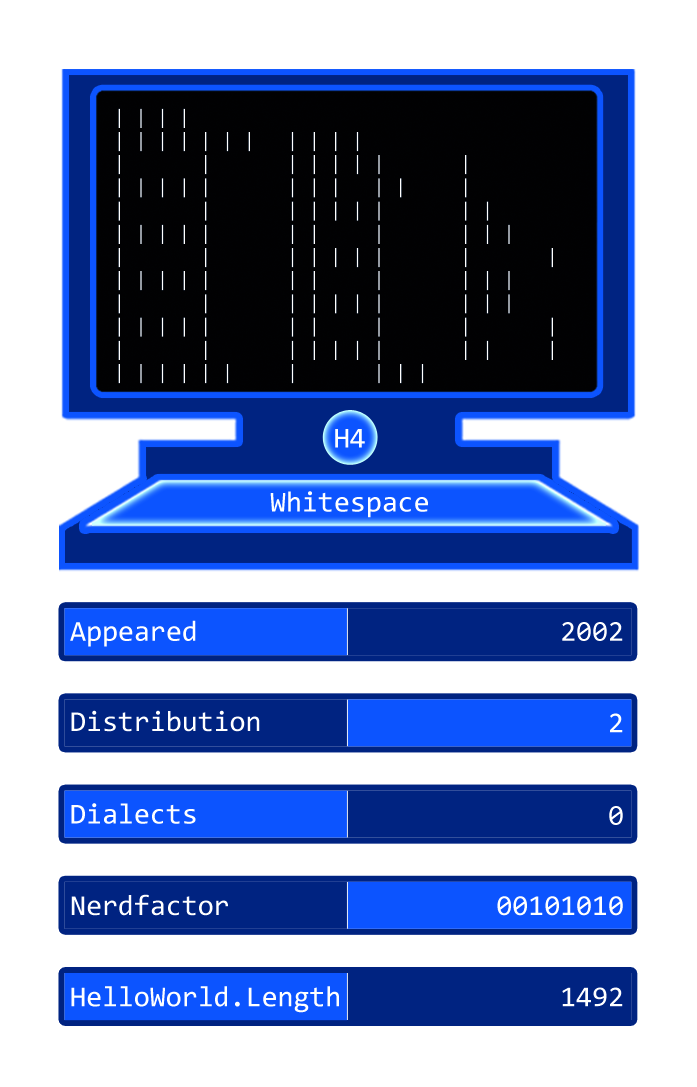
<style>
.page{position:relative;width:697px;height:1087px;background:#ffffff}
.page>*{position:absolute;margin:0}
.t1{font:19.3px "Consolas";color:#ffffff}
.t2{font:29px "Consolas";color:#ffffff}
</style>
<div class="page">
<p class="t1" style="left:118px;top:108px;width:435px;height:276px">| | | |<br>| | | | | | |   | | | |<br>|       |       | | | | |       |<br>| | | | |       | | |   | |     |<br>|       |       | | | | |       | |<br>| | | | |       | |     |       | | |<br>|       |       | | | | |       |       |<br>| | | | |       | |     |       | | |<br>|       |       | | | | |       | | |<br>| | | | |       | |     |       |       |   <br>|       |       | | | | |       | |     |<br>| | | | | |     |       | | |</p>
<p class="t2" style="left:335px;top:429px;width:30px;height:19px">H4</p>
<p class="t2" style="left:270px;top:491px;width:158px;height:27px">Whitespace</p>
<p class="t2" style="left:70px;top:620px;width:126px;height:27px">Appeared</p>
<p class="t2" style="left:562px;top:622px;width:61px;height:19px">2002</p>
<p class="t2" style="left:71px;top:710px;width:189px;height:22px">Distribution</p>
<p class="t2" style="left:610px;top:713px;width:13px;height:20px">2</p>
<p class="t2" style="left:71px;top:803px;width:125px;height:21px">Dialects</p>
<p class="t2" style="left:609px;top:806px;width:14px;height:19px">0</p>
<p class="t2" style="left:71px;top:894px;width:157px;height:22px">Nerdfactor</p>
<p class="t2" style="left:497px;top:896px;width:126px;height:20px">00101010</p>
<p class="t2" style="left:71px;top:986px;width:268px;height:27px">HelloWorld.Length</p>
<p class="t2" style="left:562px;top:987px;width:61px;height:20px">1492</p>
</div>
